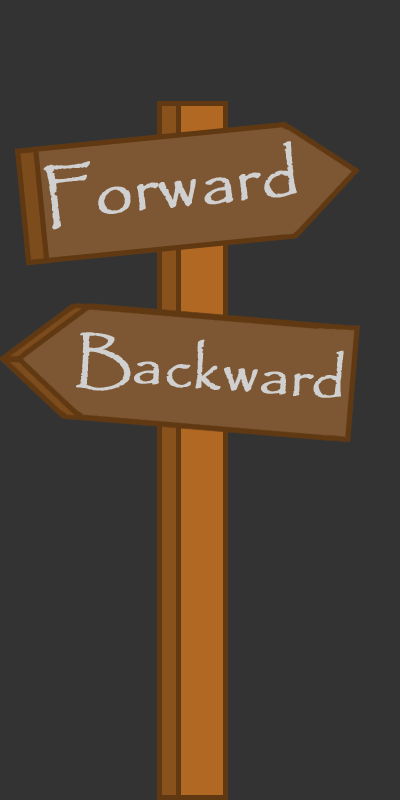
<style>
.page{position:relative;width:400px;height:800px;background:#333333}
.page>*{position:absolute;margin:0}
.t1{font:66.7px "Papyrus-Regular";color:#d0d0d0;font-weight:bold}
.t2{font:58.3px "Papyrus-Regular";color:#d0d0d0;font-weight:bold}
</style>
<div class="page">
<p class="t1" style="left:43px;top:141px;width:254px;height:89px;rotate:-6deg">Forward</p>
<p class="t2" style="left:76px;top:332px;width:268px;height:66px;rotate:5deg">Backward</p>
</div>
